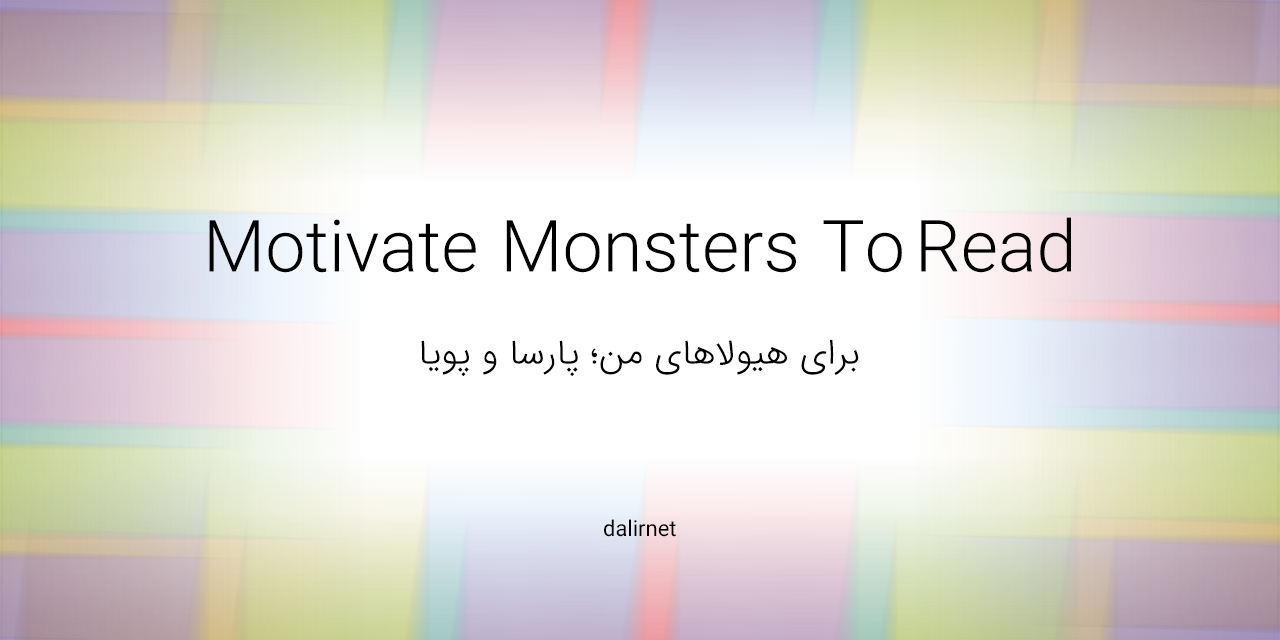
<style>
.page{position:relative;width:1280px;height:640px}
.page>*{position:absolute;margin:0}
.t1{font:72px "IRANSans-UltraLight";color:#000000}
.t2{font:36px "IRANSans-Light";color:#000000}
.t3{font:22px "IRANSans";color:#000000}
</style>
<div class="page">
<p class="t1" style="left:209px;top:217px;width:862px;height:56px">Motivate Monsters To Read</p>
<p class="t2" style="left:421px;top:339px;width:438px;height:38px">برای هیولاهای من؛ پارسا و پویا</p>
<p class="t3" style="left:604px;top:519px;width:72px;height:18px">dalirnet</p>
</div>
